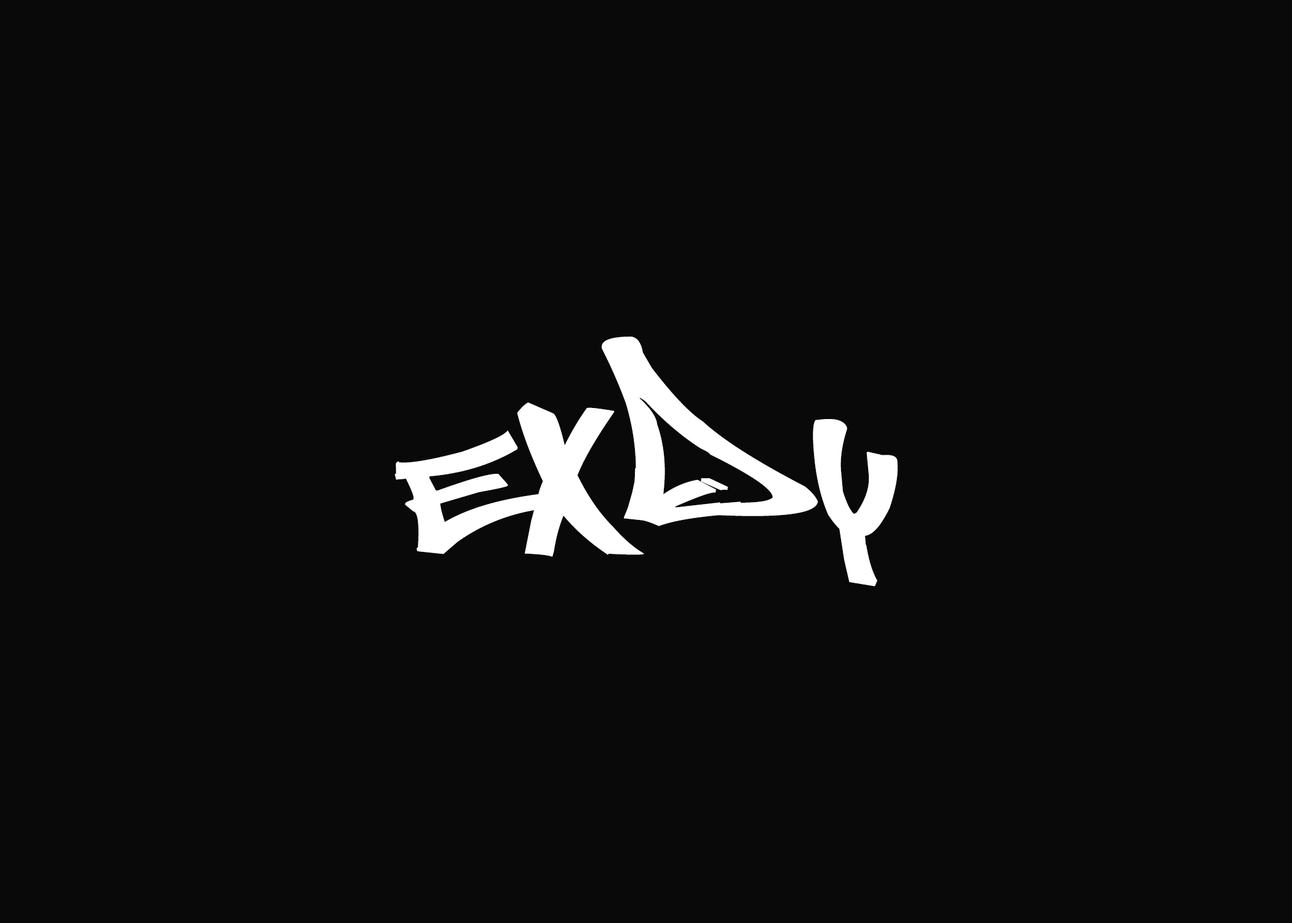
<style>
.page{position:relative;width:1292px;height:923px;background:#090909}
.page>*{position:absolute;margin:0}
.t1{font:282px "MostWazted";color:#ffffff}
</style>
<div class="page">
<p class="t1" style="left:394px;top:337px;width:504px;height:249px">exdy</p>
</div>
